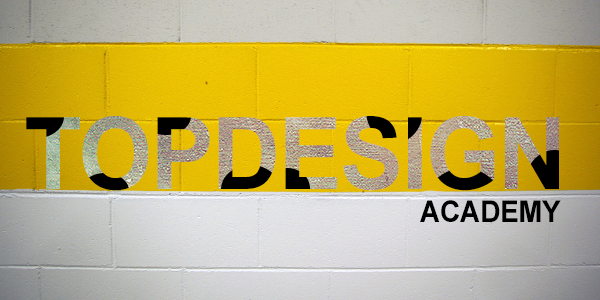
<style>
.page{position:relative;width:600px;height:300px}
.page>*{position:absolute;margin:0}
.t1{font:100px "Arial-BoldMT";letter-spacing:-0.02em;scale:0.95 1}
.t2{font:30px "Arial-BoldMT";letter-spacing:-0.02em;color:#000000;scale:0.95 1}
</style>
<div class="page">
<p class="t1" style="left:26px;top:116px;width:533px;height:75px">TOPDESIGN</p>
<p class="t2" style="left:420px;top:200px;width:141px;height:22px">ACADEMY</p>
</div>
